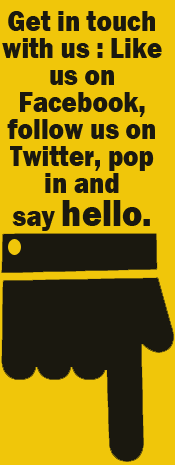
<style>
.page{position:relative;width:175px;height:465px;background:#f0c60a}
.page>*{position:absolute;margin:0}
.t1{font:29px/27px "FranklinGothic-Heavy";color:#1a180f;scale:0.9 1}
.t2{font:38px/33px "FranklinGothic-Heavy";color:#1a180f;scale:0.9 1}
</style>
<div class="page">
<p class="t1" style="left:2px;top:11px;width:160px;height:220px;text-align:center">Get in touch with us : Like<br>us on <br>Facebook, follow us on<br>Twitter, pop in and <br>say <span class="t2">hello.</span></p>
</div>
